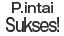
<style>
.page{position:relative;width:64px;height:36px;background:#ffffff}
.page>*{position:absolute;margin:0}
.t1{font:13px/14px "GothicMB101Pro-Medium";color:#2a2a2a}
.t2{font:18px/14px "GothicMB101Pro-Medium";letter-spacing:-0.08em;color:#2a2a2a;scale:0.8 1}
</style>
<div class="page">
<p class="t1" style="left:6px;top:2px;width:53px;height:30px;text-align:center">P.intai<br><span class="t2">Sukses!</span></p>
</div>
